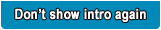
<style>
.page{position:relative;width:161px;height:30px;background:#008aba}
.page>*{position:absolute;margin:0}
.t1{font:14px "ArialNarrow-Bold";color:#ffffff;font-weight:bold}
</style>
<div class="page">
<p class="t1" style="left:15px;top:8px;width:131px;height:14px">Don’t show intro again</p>
</div>
